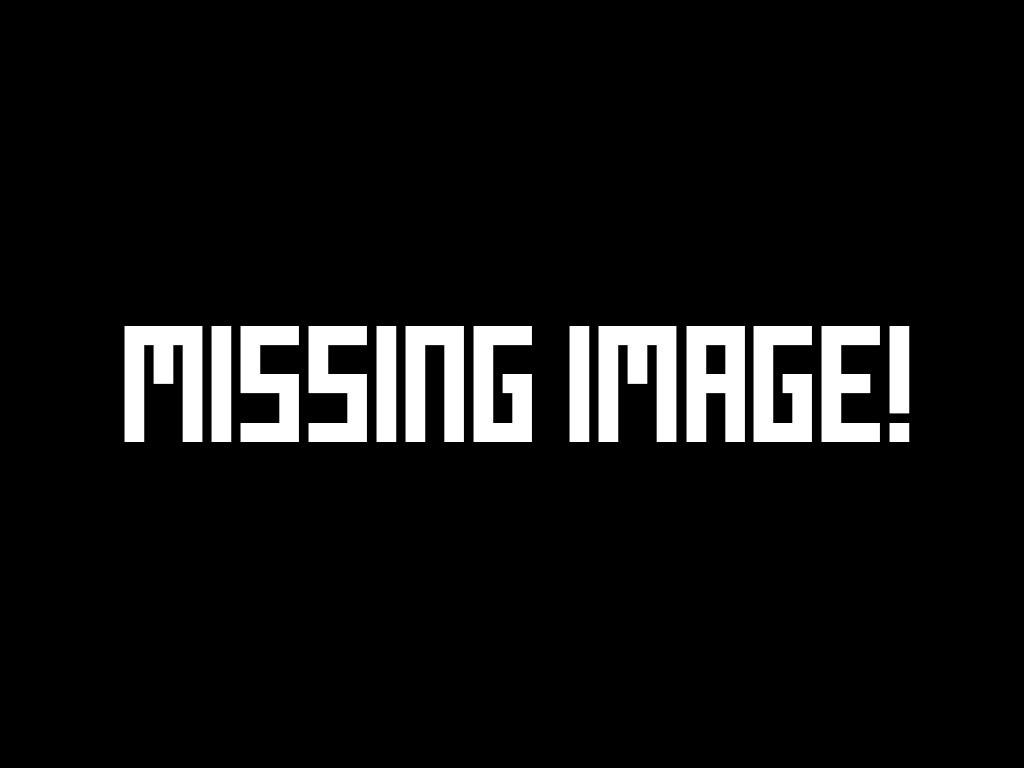
<style>
.page{position:relative;width:1024px;height:768px;background:#000000}
.page>*{position:absolute;margin:0}
.t1{font:155px "Mecha-Bold";color:#ffffff}
</style>
<div class="page">
<p class="t1" style="left:124px;top:326px;width:786px;height:116px">MISSING IMAGE!</p>
</div>
